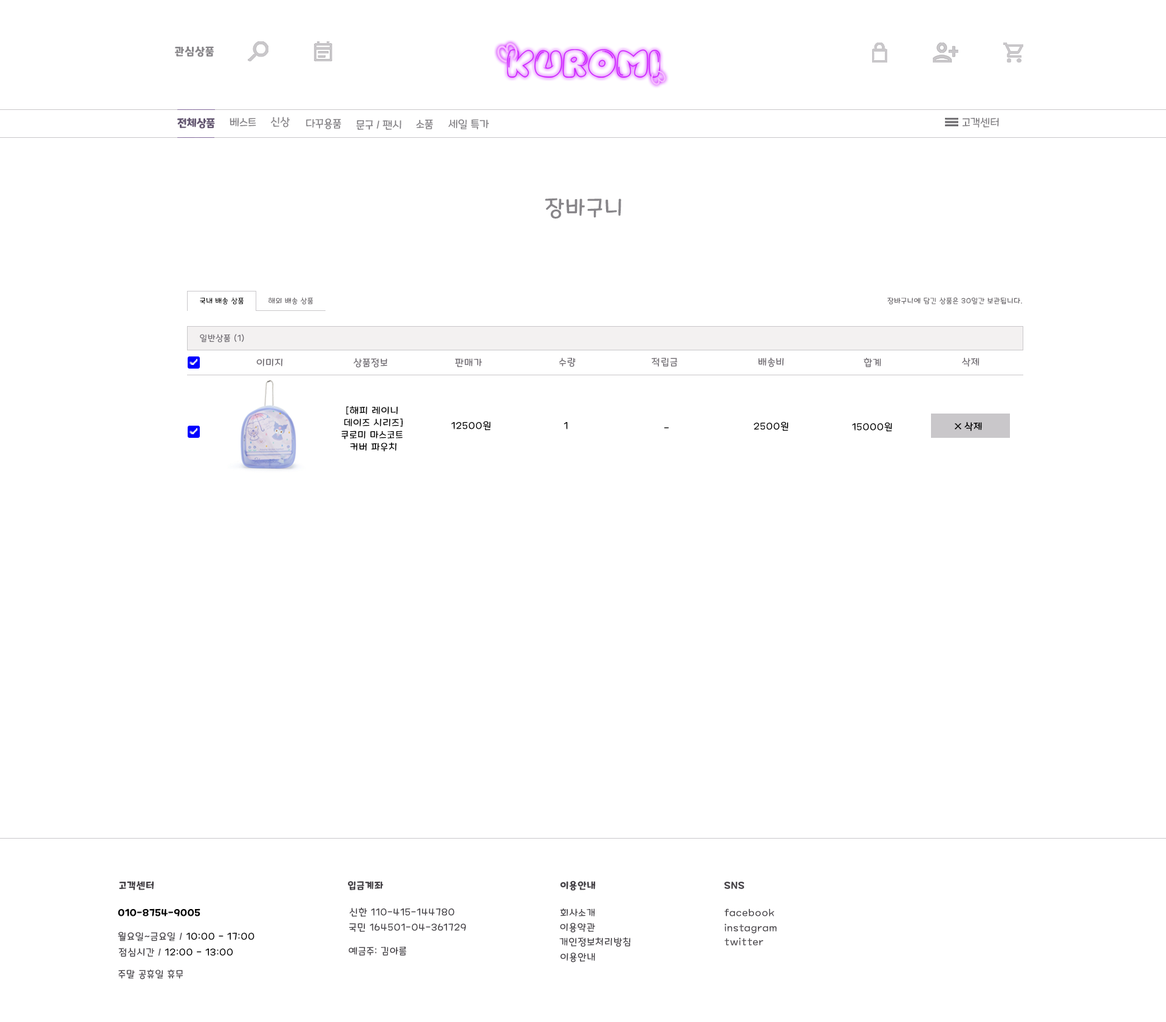
<style>
.page{position:relative;width:1166px;height:1022px;background:#ffffff}
.page>*{position:absolute;margin:0}
.t1{font:10.9px "MaplestoryBold";letter-spacing:0.06em;color:#878589}
.t2{font:10.9px "MaplestoryBold";color:#645772}
.t3{font:10.9px "MaplestoryLight";color:#878589}
.t4{font:21.9px "MaplestoryLight";letter-spacing:0.06em;color:#878589}
.t5{font:7.3px "MaplestoryLight";letter-spacing:0.06em;color:#000000}
.t6{font:7.3px "MaplestoryLight";letter-spacing:0.06em;color:#646165}
.t7{font:8.5px "MaplestoryLight";letter-spacing:0.06em;color:#716d73}
.t8{font:9.7px "MaplestoryLight";letter-spacing:0.06em;color:#716d73}
.t9{font:9.7px/12.1px "MaplestoryLight";letter-spacing:0.06em;color:#000000}
.t10{font:9.7px "MaplestoryLight";letter-spacing:0.06em;color:#000000}
.t11{font:9.7px "MaplestoryBold";letter-spacing:0.06em;color:#464348}
.t12{font:9.7px "MaplestoryBold";letter-spacing:0.06em;color:#000000}
.t13{font:9.7px "MaplestoryLight";letter-spacing:0.06em;color:#464348}
</style>
<div class="page">
<p class="t1" style="left:175px;top:46px;width:39px;height:11px">관심상품</p>
<p class="t2" style="left:177px;top:118px;width:38px;height:11px">전체상품</p>
<p class="t3" style="left:230px;top:118px;width:26px;height:9px">베스트</p>
<p class="t3" style="left:271px;top:117px;width:19px;height:11px">신상</p>
<p class="t3" style="left:306px;top:118px;width:35px;height:11px">다꾸용품</p>
<p class="t3" style="left:357px;top:120px;width:45px;height:10px">문구 / 팬시</p>
<p class="t3" style="left:416px;top:120px;width:17px;height:9px">소품</p>
<p class="t3" style="left:448px;top:119px;width:41px;height:10px">세일 특가</p>
<p class="t3" style="left:963px;top:118px;width:36px;height:10px">고객센터</p>
<p class="t4" style="left:545px;top:198px;width:76px;height:21px">장바구니</p>
<p class="t5" style="left:200px;top:298px;width:44px;height:7px">국내 배송 상품</p>
<p class="t6" style="left:269px;top:297px;width:44px;height:8px">해외 배송 상품</p>
<p class="t6" style="left:888px;top:298px;width:134px;height:7px">장바구니에 담긴 상품은 30일간 보관됩니다.</p>
<p class="t7" style="left:200px;top:334px;width:44px;height:9px">일반상품 (1)</p>
<p class="t8" style="left:256px;top:358px;width:26px;height:8px">이미지</p>
<p class="t8" style="left:354px;top:358px;width:34px;height:10px">상품정보</p>
<p class="t8" style="left:455px;top:358px;width:27px;height:10px">판매가</p>
<p class="t8" style="left:559px;top:358px;width:17px;height:9px">수량</p>
<p class="t8" style="left:652px;top:358px;width:26px;height:9px">적립금</p>
<p class="t8" style="left:759px;top:358px;width:25px;height:10px">배송비</p>
<p class="t8" style="left:864px;top:358px;width:17px;height:10px">합계</p>
<p class="t8" style="left:962px;top:358px;width:17px;height:9px">삭제</p>
<p class="t9" style="left:341px;top:406px;width:62px;height:46px;text-align:center">[해피 레이니 <br>데이즈 시리즈]<br>쿠로미 마스코트 <br>커버 파우치</p>
<p class="t10" style="left:451px;top:421px;width:40px;height:10px">12500원</p>
<p class="t10" style="left:564px;top:422px;width:4px;height:7px">1</p>
<p class="t10" style="left:754px;top:422px;width:34px;height:9px">2500원</p>
<p class="t10" style="left:852px;top:422px;width:40px;height:10px">15000원</p>
<p class="t10" style="left:664px;top:427px;width:5px;height:2px">-</p>
<p class="t11" style="left:119px;top:881px;width:35px;height:10px">고객센터</p>
<p class="t11" style="left:348px;top:881px;width:35px;height:10px">입금계좌</p>
<p class="t11" style="left:560px;top:881px;width:35px;height:10px">이용안내</p>
<p class="t11" style="left:724px;top:882px;width:21px;height:7px">SNS</p>
<p class="t12" style="left:118px;top:909px;width:82px;height:8px">010-8754-9005</p>
<p class="t13" style="left:349px;top:908px;width:105px;height:9px">신한 110-415-144780</p>
<p class="t13" style="left:560px;top:909px;width:35px;height:8px">회사소개</p>
<p class="t13" style="left:725px;top:909px;width:50px;height:8px">facebook</p>
<p class="t13" style="left:349px;top:923px;width:117px;height:9px">국민 164501-04-361729</p>
<p class="t13" style="left:560px;top:923px;width:35px;height:10px">이용약관</p>
<p class="t13" style="left:725px;top:924px;width:52px;height:10px">instagram</p>
<p class="t10" style="left:118px;top:932px;width:137px;height:10px"><span class="t13">월요일~금요일 / </span>10:00 - 17:00</p>
<p class="t13" style="left:559px;top:937px;width:72px;height:10px">개인정보처리방침</p>
<p class="t13" style="left:725px;top:938px;width:39px;height:8px">twitter</p>
<p class="t10" style="left:118px;top:948px;width:115px;height:9px"><span class="t13">점심시간 / </span>12:00 - 13:00</p>
<p class="t13" style="left:349px;top:947px;width:57px;height:9px">예금주: 김아름</p>
<p class="t13" style="left:561px;top:953px;width:34px;height:10px">이용안내</p>
<p class="t13" style="left:118px;top:970px;width:65px;height:10px">주말 공휴일 휴무</p>
</div>
